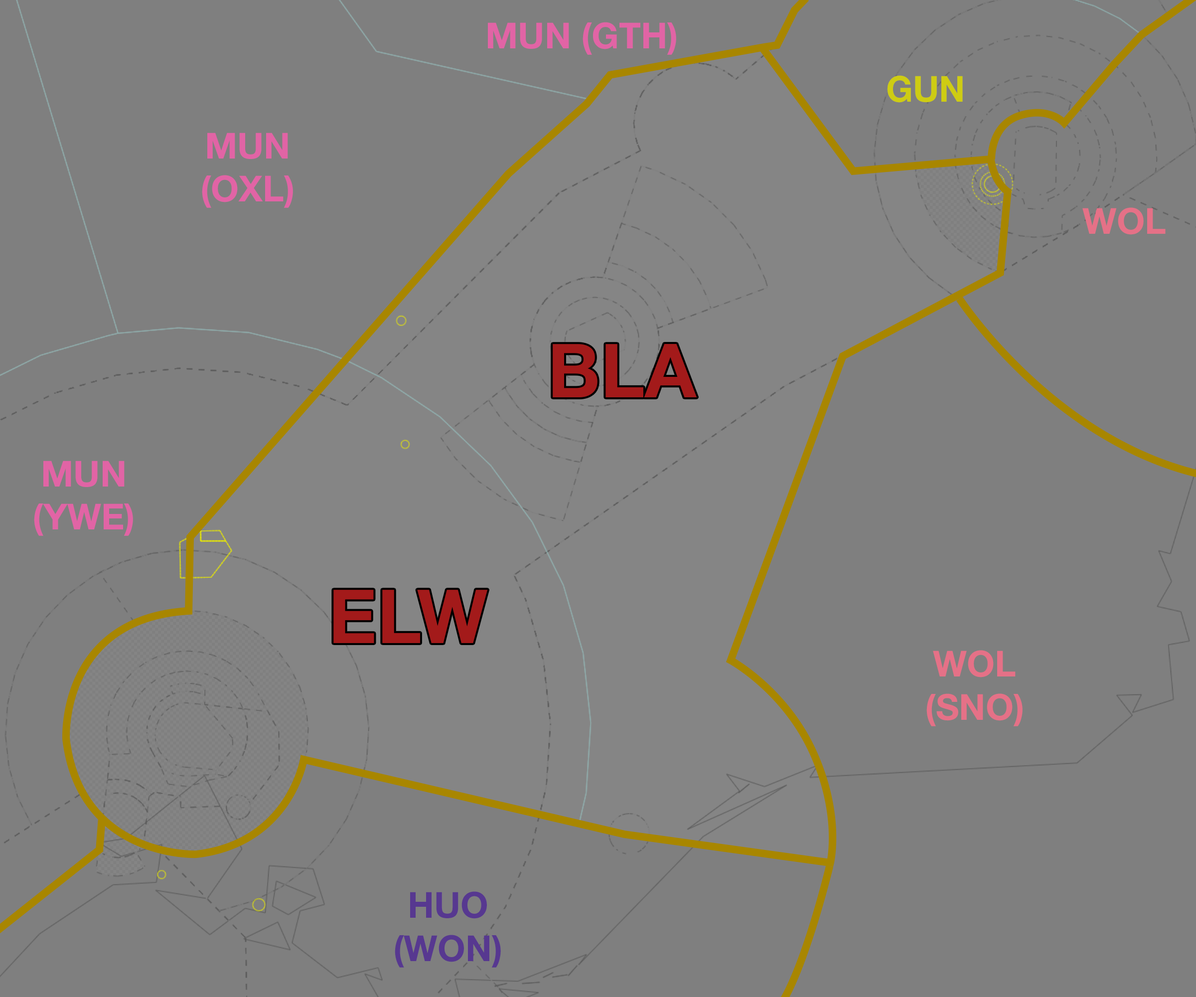
<style>
.page{position:relative;width:1196px;height:997px;background:#7f7f7f}
.page>*{position:absolute;margin:0}
.t1{font:35.9px "HelveticaNeue-Bold";color:#e164a5}
.t2{font:35.9px "HelveticaNeue-Bold";color:#cecc13}
.t3{font:35.9px "HelveticaNeue-Bold";color:#e57187}
.t4{font:74.8px "HelveticaNeue-Bold";color:#a31a1a}
.t5{font:35.9px "HelveticaNeue-Bold";color:#573890}
</style>
<div class="page">
<p class="t1" style="left:488px;top:22px;width:188px;height:33px">MUN (GTH)</p>
<p class="t2" style="left:887px;top:75px;width:76px;height:28px">GUN</p>
<p class="t1" style="left:202px;top:133px;width:91px;height:75px;text-align:center">MUN<br>(OXL)</p>
<p class="t3" style="left:1083px;top:207px;width:83px;height:28px">WOL</p>
<p class="t4" style="left:553px;top:344px;width:144px;height:53px">BLA</p>
<p class="t1" style="left:34px;top:461px;width:99px;height:75px;text-align:center">MUN<br>(YWE)</p>
<p class="t4" style="left:333px;top:590px;width:155px;height:53px">ELW</p>
<p class="t3" style="left:927px;top:650px;width:96px;height:76px;text-align:center">WOL<br>(SNO)</p>
<p class="t5" style="left:395px;top:891px;width:106px;height:76px;text-align:center">HUO<br>(WON)</p>
</div>
